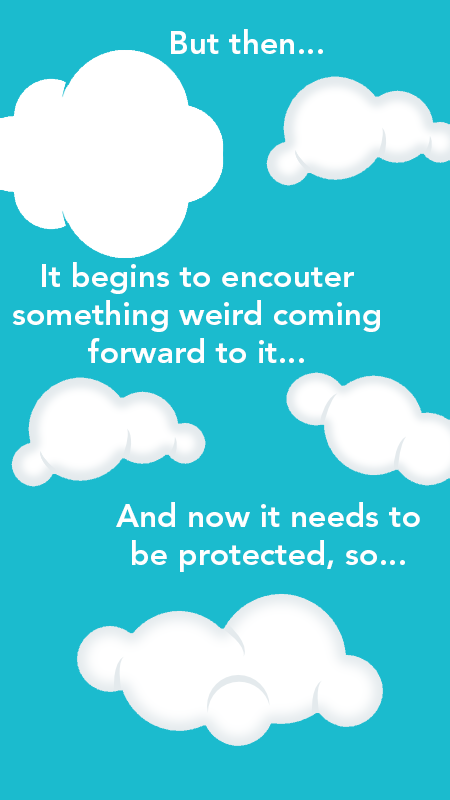
<style>
.page{position:relative;width:450px;height:800px;background:#1bbbce}
.page>*{position:absolute;margin:0}
.t1{font:32px "AvenirLTStd-Heavy";color:#ffffff}
</style>
<div class="page">
<p class="t1" style="left:171px;top:29px;width:152px;height:25px">But then...</p>
<p class="t1" style="left:12px;top:262px;width:368px;height:101px;text-align:center">It begins to encouter<br>something weird coming<br>forward to it...</p>
<p class="t1" style="left:116px;top:502px;width:304px;height:70px;text-align:center">And now it needs to<br>be protected, so...</p>
</div>
